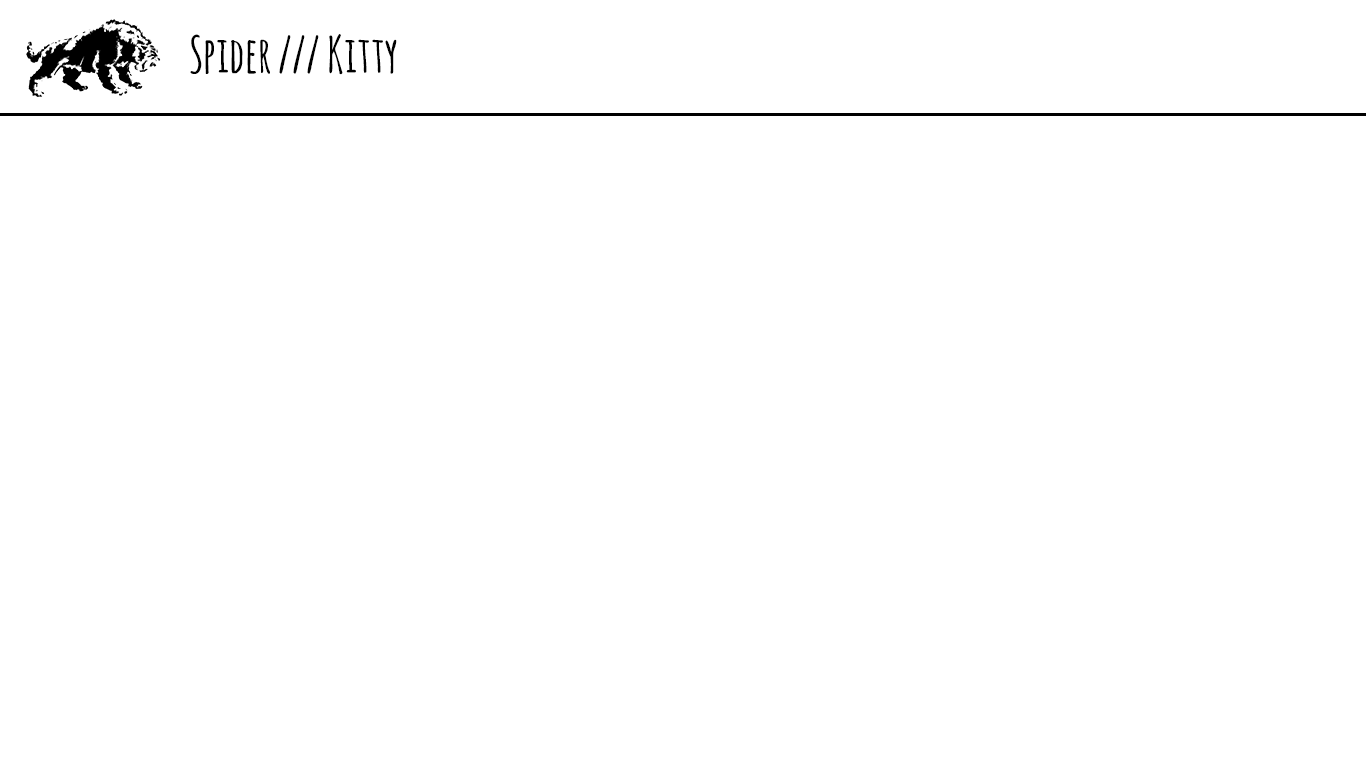
<style>
.page{position:relative;width:1366px;height:768px;background:#ffffff}
.page>*{position:absolute;margin:0}
.t1{font:50px "AmaticSC-Bold";color:#000000}
</style>
<div class="page">
<p class="t1" style="left:190px;top:34px;width:207px;height:41px">Spider /// Kitty</p>
</div>
